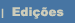
<style>
.page{position:relative;width:75px;height:23px;background:#4775a3}
.page>*{position:absolute;margin:0}
.t1{font:12px "Arial-Black";color:#cdccba}
.t2{font:10px "Arial-Black";color:#cdccba}
</style>
<div class="page">
<p class="t1" style="left:1px;top:7px;width:63px;height:12px"><span class="t2">|</span>  Edições</p>
</div>
